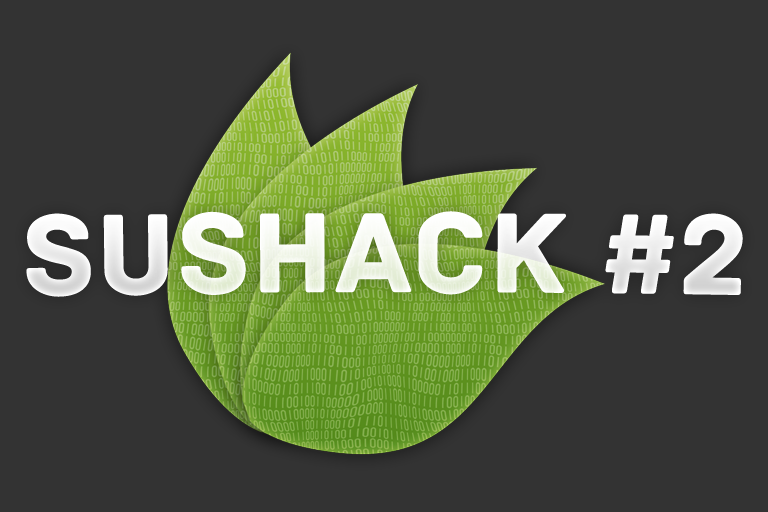
<style>
.page{position:relative;width:768px;height:512px;background:#333333}
.page>*{position:absolute;margin:0}
.t1{font:120px "Archive";color:#ffffff}
</style>
<div class="page">
<p class="t1" style="left:26px;top:211px;width:717px;height:86px">SusHack #2</p>
</div>
